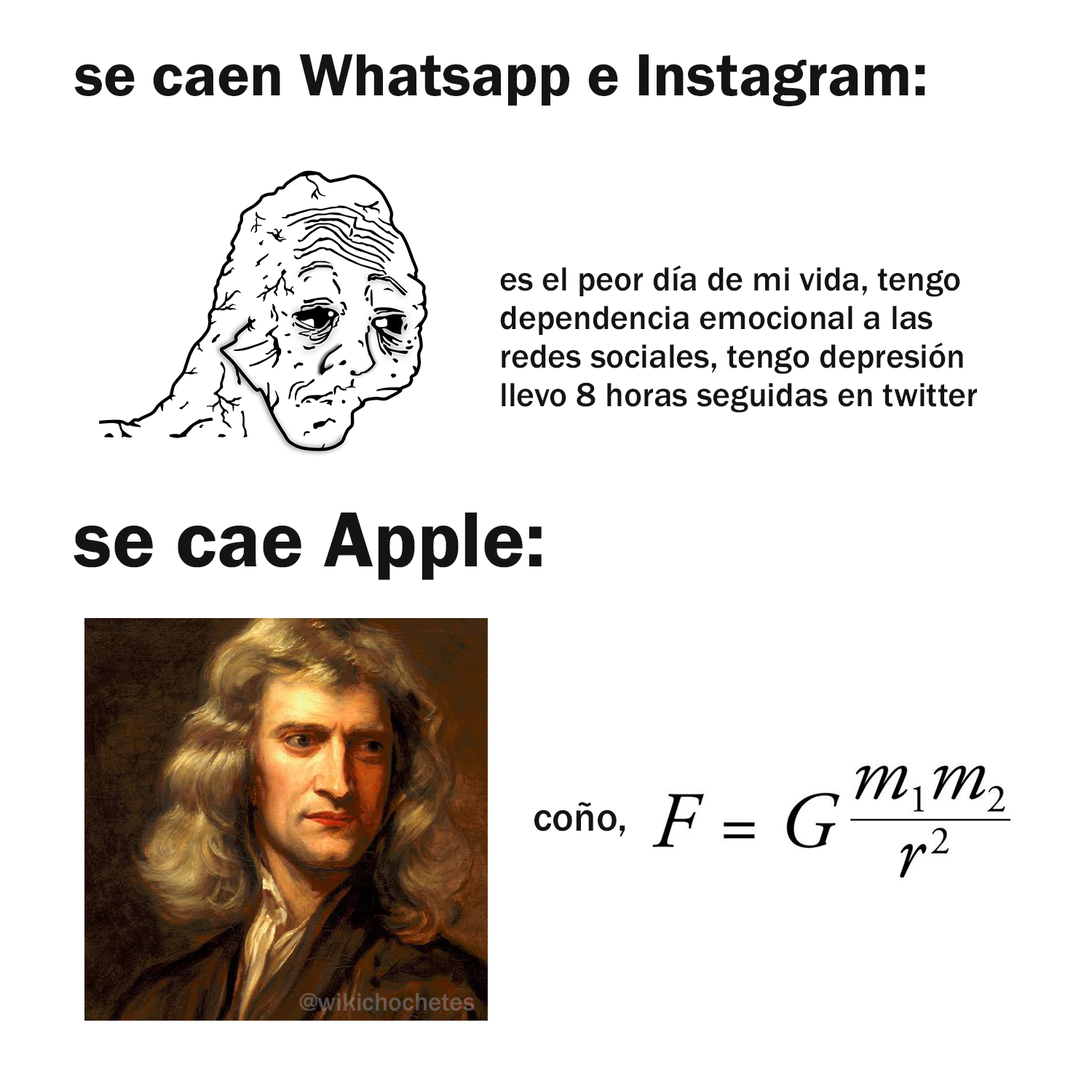
<style>
.page{position:relative;width:1092px;height:1092px;background:#ffffff}
.page>*{position:absolute;margin:0}
.t1{font:61.8px "FranklinGothic-Demi";color:#141414}
.t2{font:34.6px "FranklinGothic-Medium";color:#141414}
.t3{font:80.9px "FranklinGothic-Demi";color:#141414}
.t4{font:40.9px "FranklinGothic-Medium";color:#141414}
.t5{font:25.8px "FranklinGothic-Medium";color:#69564b}
</style>
<div class="page">
<p class="t1" style="left:74px;top:54px;width:851px;height:52px">se caen Whatsapp e Instagram:</p>
<p class="t2" style="left:500px;top:265px;width:477px;height:148px">es el peor día de mi vida, tengo<br>dependencia emocional a las<br>redes sociales, tengo depresión<br>llevo 8 horas seguidas en twitter</p>
<p class="t3" style="left:74px;top:513px;width:468px;height:67px">se cae Apple:</p>
<p class="t4" style="left:534px;top:802px;width:91px;height:34px">coño,</p>
<p class="t5" style="left:299px;top:993px;width:176px;height:18px">@wikichochetes</p>
</div>
